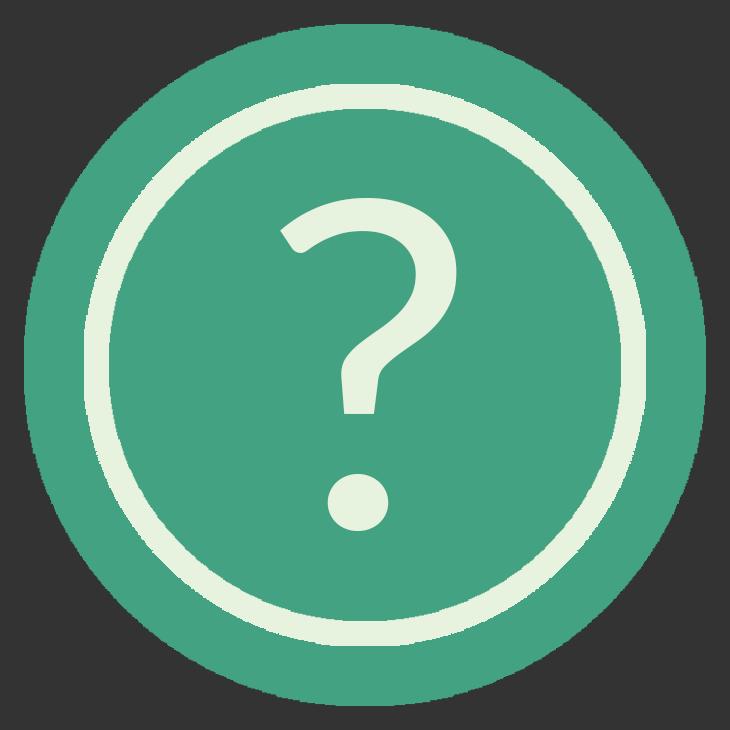
<style>
.page{position:relative;width:730px;height:730px;background:#43a282}
.page>*{position:absolute;margin:0}
.t1{font:454.4px "Lato-Regular";color:#e7f2df;scale:1.07 1}
</style>
<div class="page">
<p class="t1" style="left:280px;top:198px;width:177px;height:333px">?</p>
</div>
